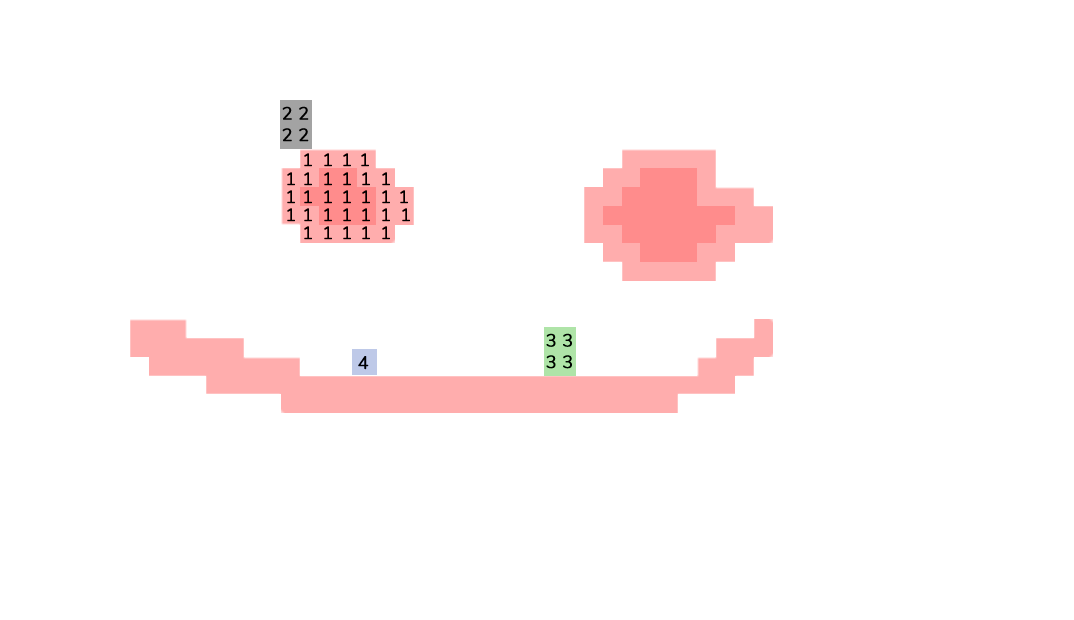
<style>
.page{position:relative;width:1074px;height:620px;background:#ffffff}
.page>*{position:absolute;margin:0}
.t1{font:18px "Nunito-Regular";color:#000000;font-weight:bold}
</style>
<div class="page">
<p class="t1" style="left:282px;top:106px;width:27px;height:36px">2 2<br>2 2</p>
<p class="t1" style="left:304px;top:153px;width:8px;height:14px">1</p>
<p class="t1" style="left:324px;top:153px;width:8px;height:14px">1</p>
<p class="t1" style="left:343px;top:153px;width:8px;height:14px">1</p>
<p class="t1" style="left:361px;top:153px;width:8px;height:14px">1</p>
<p class="t1" style="left:287px;top:172px;width:8px;height:14px">1</p>
<p class="t1" style="left:304px;top:172px;width:8px;height:14px">1</p>
<p class="t1" style="left:324px;top:172px;width:8px;height:14px">1</p>
<p class="t1" style="left:343px;top:172px;width:8px;height:14px">1</p>
<p class="t1" style="left:362px;top:172px;width:8px;height:14px">1</p>
<p class="t1" style="left:382px;top:172px;width:8px;height:14px">1</p>
<p class="t1" style="left:287px;top:190px;width:8px;height:14px">1</p>
<p class="t1" style="left:304px;top:190px;width:8px;height:14px">1</p>
<p class="t1" style="left:324px;top:190px;width:8px;height:14px">1</p>
<p class="t1" style="left:343px;top:190px;width:8px;height:14px">1</p>
<p class="t1" style="left:362px;top:190px;width:8px;height:14px">1</p>
<p class="t1" style="left:382px;top:190px;width:8px;height:14px">1</p>
<p class="t1" style="left:400px;top:190px;width:8px;height:14px">1</p>
<p class="t1" style="left:287px;top:208px;width:8px;height:14px">1</p>
<p class="t1" style="left:304px;top:208px;width:8px;height:14px">1</p>
<p class="t1" style="left:324px;top:208px;width:8px;height:14px">1</p>
<p class="t1" style="left:343px;top:208px;width:8px;height:14px">1</p>
<p class="t1" style="left:362px;top:208px;width:8px;height:14px">1</p>
<p class="t1" style="left:382px;top:208px;width:8px;height:14px">1</p>
<p class="t1" style="left:402px;top:208px;width:8px;height:14px">1</p>
<p class="t1" style="left:304px;top:226px;width:8px;height:14px">1</p>
<p class="t1" style="left:324px;top:226px;width:8px;height:14px">1</p>
<p class="t1" style="left:343px;top:226px;width:8px;height:14px">1</p>
<p class="t1" style="left:362px;top:226px;width:8px;height:14px">1</p>
<p class="t1" style="left:382px;top:226px;width:8px;height:14px">1</p>
<p class="t1" style="left:546px;top:333px;width:26px;height:36px">3 3<br>3 3</p>
<p class="t1" style="left:358px;top:356px;width:11px;height:14px">4</p>
</div>
